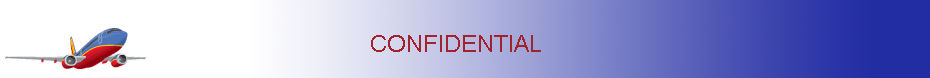
<style>
.page{position:relative;width:930px;height:78px;background:#ffffff}
.page>*{position:absolute;margin:0}
.t1{font:24px "ArialMT";color:#a3232c}
</style>
<div class="page">
<p class="t1" style="left:371px;top:35px;width:170px;height:17px">CONFIDENTIAL</p>
</div>
